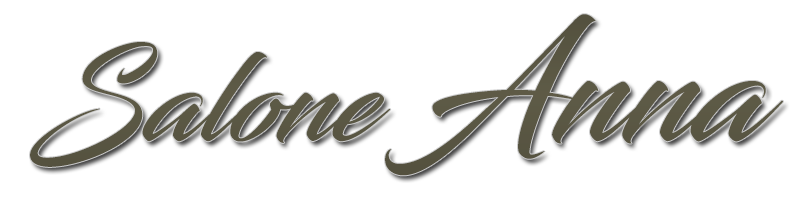
<style>
.page{position:relative;width:800px;height:200px;background:#ffffff}
.page>*{position:absolute;margin:0}
.t1{font:120px "Blacksword";color:#5b5844}
.t2{font:150px "Blacksword";color:#5b5844}
</style>
<div class="page">
<p class="t1" style="left:30px;top:14px;width:753px;height:162px">Salone <span class="t2">Anna</span></p>
</div>
